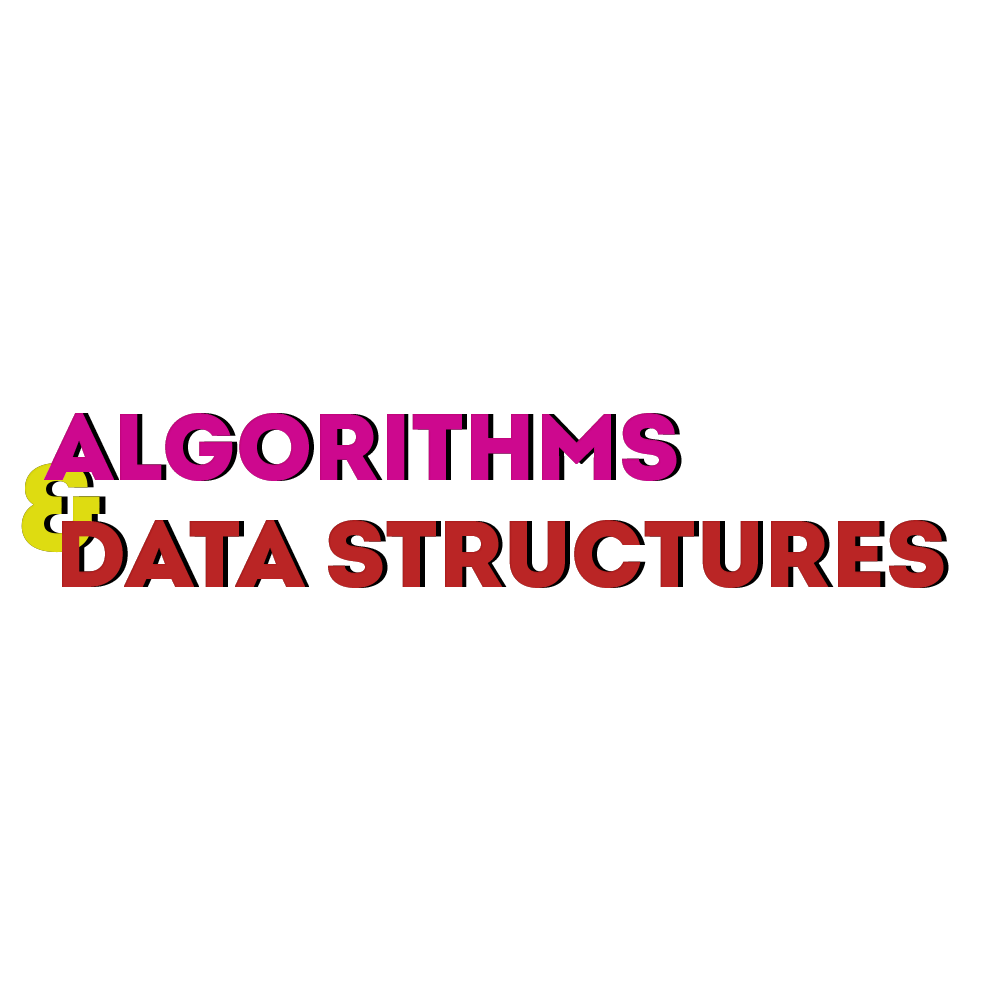
<style>
.page{position:relative;width:1000px;height:1000px;background:#ffffff}
.page>*{position:absolute;margin:0}
.t1{font:94.9px "IntroDemo-BlackCAPS";color:#cd088e}
.t2{font:124.2px "IntroDemo-BlackCAPS";color:#dedc11}
.t3{font:124.2px "IntroDemo-BlackCAPS"}
.t4{font:94.9px "IntroDemo-BlackCAPS";color:#ba2525}
</style>
<div class="page">
<p class="t1" style="left:44px;top:413px;width:633px;height:68px">Algorithms</p>
<p class="t1" style="left:44px;top:413px;width:633px;height:68px">Algorithms</p>
<p class="t1" style="left:49px;top:413px;width:633px;height:68px">Algorithms</p>
<p class="t2" style="left:21px;top:462px;width:79px;height:91px">&amp;</p>
<p class="t2" style="left:21px;top:462px;width:79px;height:91px">&amp;</p>
<p class="t3" style="left:27px;top:462px;width:79px;height:91px">&amp;</p>
<p class="t4" style="left:62px;top:520px;width:882px;height:68px">data structures</p>
<p class="t4" style="left:62px;top:520px;width:882px;height:68px">data structures</p>
<p class="t4" style="left:67px;top:520px;width:882px;height:68px">data structures</p>
</div>
